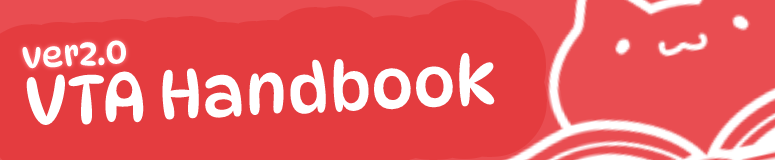
<style>
.page{position:relative;width:775px;height:160px;background:#e43c3f}
.page>*{position:absolute;margin:0}
.t1{font:34px "DynaPuff-Regular";color:#ffffff}
.t2{font:67px "DynaPuff-Regular";color:#ffffff}
</style>
<div class="page">
<p class="t1" style="left:22px;top:40px;width:104px;height:29px;rotate:-3deg">ver2.0</p>
<p class="t2" style="left:26px;top:53px;width:469px;height:72px;rotate:-3deg">VTA Handbook</p>
</div>
